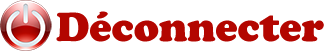
<style>
.page{position:relative;width:324px;height:51px;background:#ffffff}
.page>*{position:absolute;margin:0}
.t1{font:42px "CooperBlack";color:#b30600}
</style>
<div class="page">
<p class="t1" style="left:56px;top:11px;width:268px;height:31px">Déconnecter</p>
</div>
